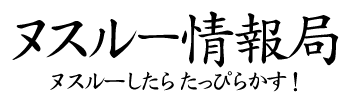
<style>
.page{position:relative;width:350px;height:100px;background:#ffffff}
.page>*{position:absolute;margin:0}
.t1{font:60px "DFKaiSho-Md-MP-RKSJ-H";letter-spacing:-0.12em;color:#000000}
.t2{font:48px "DFKaiSho-Md-MP-RKSJ-H";letter-spacing:-0.12em;color:#000000}
.t3{font:24px "DFKaiSho-Md-MP-RKSJ-H";letter-spacing:-0.22em;color:#000000}
</style>
<div class="page">
<p class="t1" style="left:12px;top:11px;width:327px;height:57px">ヌスル<span class="t2">ー</span>情報局</p>
<p class="t3" style="left:50px;top:71px;width:248px;height:21px">ヌスルーしたらたっぴらかす！</p>
</div>
